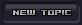
<style>
.page{position:relative;width:82px;height:25px;background:#20202c}
.page>*{position:absolute;margin:0}
.t1{font:8px "04b09"}
</style>
<div class="page">
<p class="t1" style="left:13px;top:10px;width:58px;height:5px">NEW TOPIC</p>
</div>
